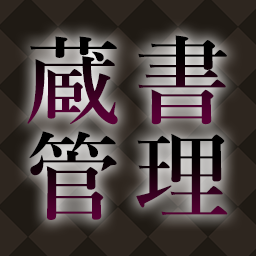
<style>
.page{position:relative;width:256px;height:256px}
.page>*{position:absolute;margin:0}
.t1{font:96px/96px "YuMincho-Demibold";letter-spacing:0.14em}
</style>
<div class="page">
<p class="t1" style="left:27px;top:35px;width:201px;height:185px;text-align:right">蔵書<br>管理</p>
</div>
